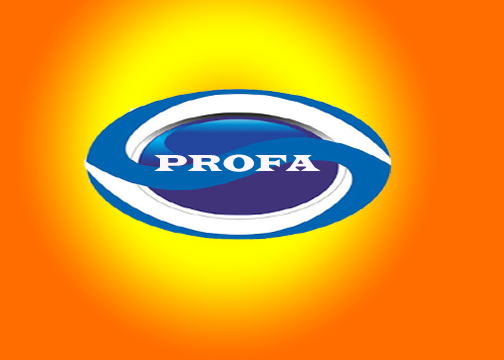
<style>
.page{position:relative;width:504px;height:360px;background:#ff6d00}
.page>*{position:absolute;margin:0}
.t1{font:24px "LatinWide";color:#fcf6ff}
</style>
<div class="page">
<p class="t1" style="left:154px;top:154px;width:167px;height:18px">PROFA</p>
</div>
